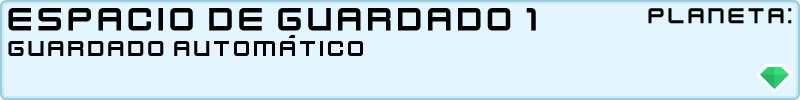
<style>
.page{position:relative;width:800px;height:100px;background:#e3f6fd}
.page>*{position:absolute;margin:0}
.t1{font:36px "KenVector-Future";color:#000000}
.t2{font:24px "KenVector-Future";color:#000000}
</style>
<div class="page">
<p class="t1" style="left:8px;top:8px;width:528px;height:23px">espacio de guardado 1</p>
<p class="t2" style="left:648px;top:8px;width:144px;height:16px">planeta:</p>
<p class="t2" style="left:8px;top:35px;width:355px;height:21px">guardado automático</p>
</div>
